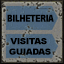
<style>
.page{position:relative;width:64px;height:64px}
.page>*{position:absolute;margin:0}
.t1{font:9.4px "Arial-Black";letter-spacing:-0.06em;color:#000000;text-transform:uppercase;scale:0.8 1}
.t2{font:8.7px "Arial-Black";letter-spacing:-0.06em;color:#000000;text-transform:uppercase;scale:1.05 1}
</style>
<div class="page">
<p class="t1" style="left:7px;top:14px;width:47px;height:8px">bilheteria</p>
<p class="t2" style="left:9px;top:38px;width:42px;height:17px;text-align:center">visitas <br>guiadas</p>
</div>
